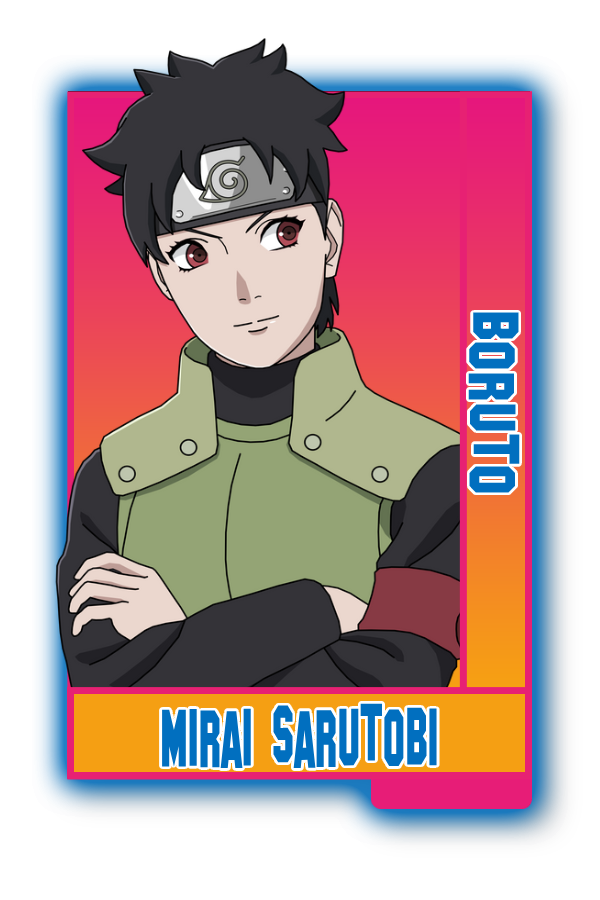
<style>
.page{position:relative;width:600px;height:900px;background:#ffffff}
.page>*{position:absolute;margin:0}
.t1{font:64.7px "SFHollywoodHills";color:#016fbf}
.t2{font:81.1px "SFHollywoodHills";color:#016fbf;scale:0.58 1}
</style>
<div class="page">
<p class="t1" style="left:468px;top:312px;width:52px;height:181px;rotate:90deg">Boruto</p>
<p class="t2" style="left:162px;top:703px;width:275px;height:66px">Mirai Sarutobi</p>
</div>
